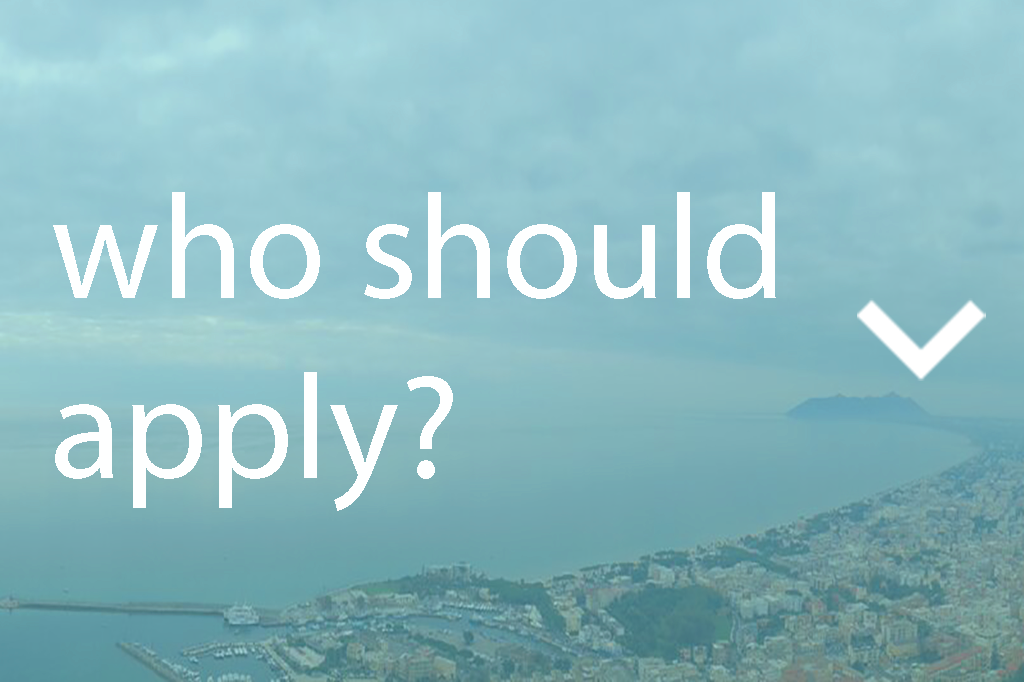
<style>
.page{position:relative;width:1024px;height:682px}
.page>*{position:absolute;margin:0}
.t1{font:150px "MyriadPro-Regular";color:#feffff}
</style>
<div class="page">
<p class="t1" style="left:53px;top:192px;width:723px;height:319px">who should<br>apply?</p>
</div>
